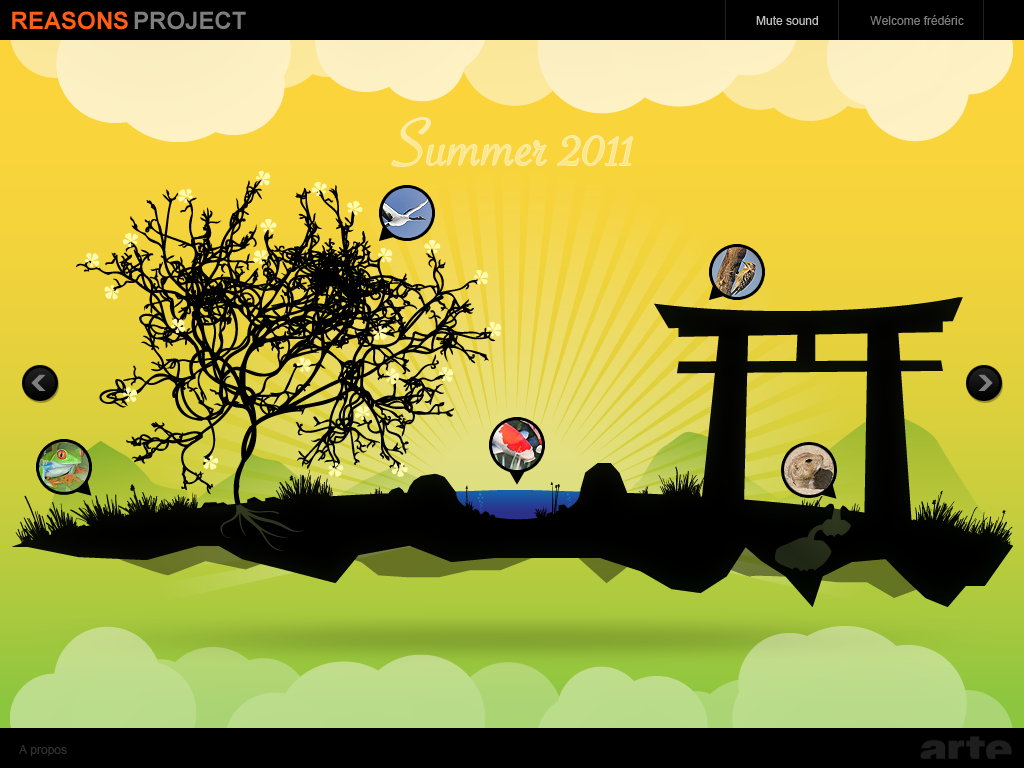
<style>
.page{position:relative;width:1024px;height:768px}
.page>*{position:absolute;margin:0}
.t1{font:24px "Arial-BoldMT";color:#ff5d18}
.t2{font:24px "Arial-BoldMT";color:#7e7e7e}
.t3{font:12px "ArialMT";color:#bfbfbf}
.t4{font:12px "ArialMT";color:#7e7e7e}
.t5{font:72px "SavoyeLetPlain";color:#fde68a}
.t6{font:12px "ArialMT";color:#313131}
</style>
<div class="page">
<p class="t1" style="left:12px;top:11px;width:116px;height:19px">REASONS</p>
<p class="t2" style="left:134px;top:11px;width:112px;height:19px">PROJECT</p>
<p class="t3" style="left:756px;top:16px;width:62px;height:9px">Mute sound</p>
<p class="t4" style="left:870px;top:15px;width:94px;height:10px">Welcome frédéric</p>
<p class="t5" style="left:392px;top:118px;width:241px;height:48px">Summer 2011</p>
<p class="t6" style="left:19px;top:745px;width:48px;height:11px">A propos</p>
</div>
